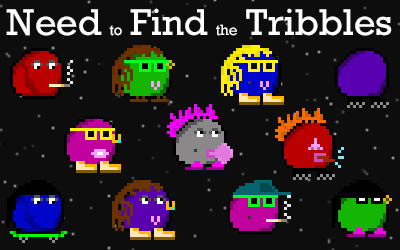
<style>
.page{position:relative;width:400px;height:250px;background:#0d0d0d}
.page>*{position:absolute;margin:0}
.t1{font:35px "Rockwell-Regular";color:#ffffff}
.t2{font:14px "Rockwell-Regular";color:#ffffff}
</style>
<div class="page">
<p class="t1" style="left:6px;top:8px;width:386px;height:28px">Need <span class="t2">to </span>Find <span class="t2">the </span>Tribbles</p>
</div>
